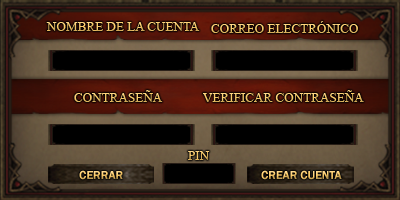
<style>
.page{position:relative;width:400px;height:200px}
.page>*{position:absolute;margin:0}
.t1{font:12px "TimesNewRomanPSMT";scale:1.09 1}
.t2{font:12px "FranklinGothic-Demi"}
</style>
<div class="page">
<p class="t1" style="left:46px;top:22px;width:154px;height:9px">NOMBRE DE LA CUENTA</p>
<p class="t1" style="left:211px;top:21px;width:147px;height:12px">CORREO ELECTRÓNICO</p>
<p class="t1" style="left:74px;top:90px;width:89px;height:12px">CONTRASEÑA</p>
<p class="t1" style="left:203px;top:90px;width:161px;height:12px">VERIFICAR CONTRASEÑA</p>
<p class="t1" style="left:188px;top:151px;width:22px;height:9px">PIN</p>
<p class="t2" style="left:79px;top:170px;width:44px;height:10px">CERRAR</p>
<p class="t2" style="left:261px;top:170px;width:81px;height:10px">CREAR CUENTA</p>
</div>
